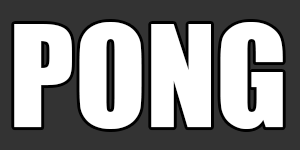
<style>
.page{position:relative;width:300px;height:150px;background:#ffffff}
.page>*{position:absolute;margin:0}
.t1{font:130px "Impact";color:#ffffff}
</style>
<div class="page">
<p class="t1" style="left:14px;top:22px;width:269px;height:107px">PONG</p>
</div>
